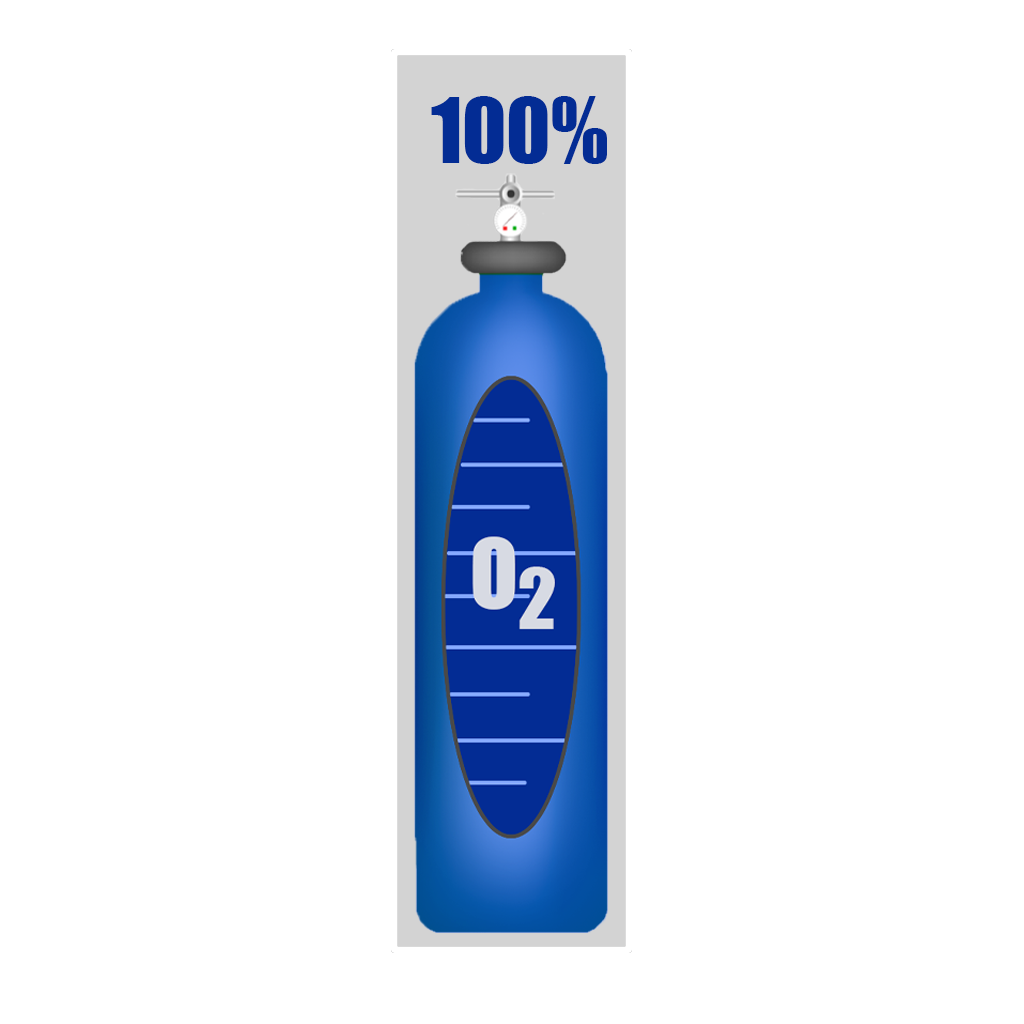
<style>
.page{position:relative;width:1024px;height:1024px;background:#ffffff}
.page>*{position:absolute;margin:0}
.t1{font:82.7px "Impact";color:#032c94}
</style>
<div class="page">
<p class="t1" style="left:431px;top:96px;width:176px;height:68px">100%</p>
</div>
